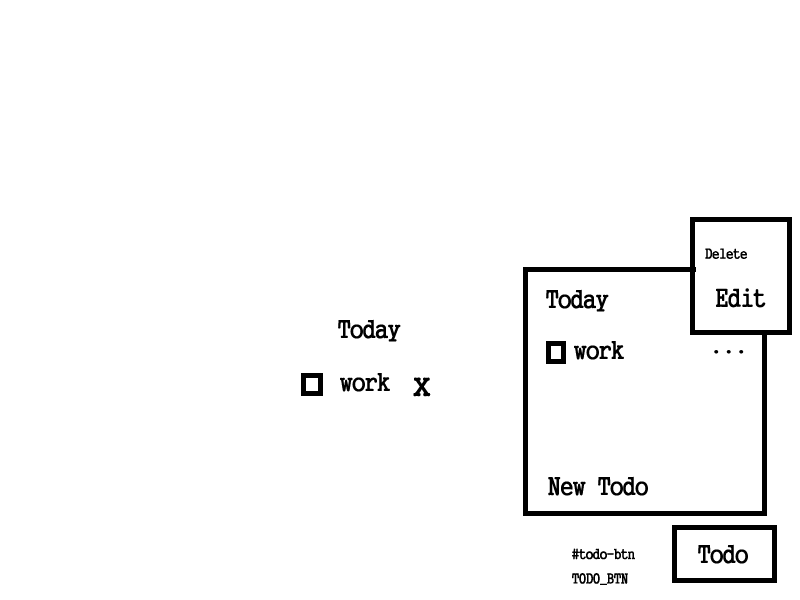
<style>
.page{position:relative;width:800px;height:600px;background:#ffffff}
.page>*{position:absolute;margin:0}
.t1{font:14px "GungsuhChe";color:#000000}
.t2{font:25px "GungsuhChe";color:#000000}
.t3{font:35px "GungsuhChe";color:#000000}
</style>
<div class="page">
<p class="t1" style="left:705px;top:248px;width:42px;height:11px">Delete</p>
<p class="t2" style="left:546px;top:289px;width:63px;height:23px">Today</p>
<p class="t2" style="left:716px;top:288px;width:50px;height:20px">Edit</p>
<p class="t2" style="left:338px;top:319px;width:63px;height:23px">Today</p>
<p class="t2" style="left:574px;top:341px;width:50px;height:19px">work</p>
<p class="t2" style="left:714px;top:350px;width:30px;height:4px">...</p>
<p class="t2" style="left:340px;top:373px;width:50px;height:19px">work</p>
<p class="t3" style="left:413px;top:377px;width:18px;height:20px">x</p>
<p class="t2" style="left:548px;top:476px;width:100px;height:20px">New Todo</p>
<p class="t2" style="left:698px;top:544px;width:50px;height:20px">Todo</p>
<p class="t1" style="left:572px;top:548px;width:63px;height:37px">#todo-btn<br>TODO_BTN</p>
</div>
